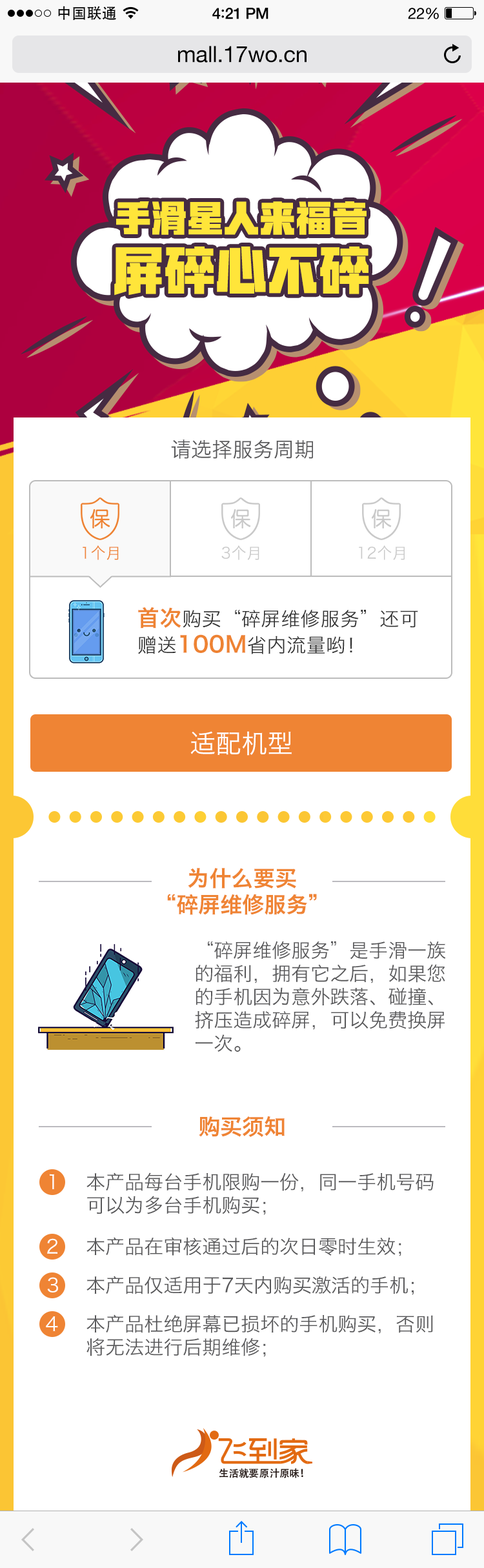
<style>
.page{position:relative;width:484px;height:1568px;background:#ffffff}
.page>*{position:absolute;margin:0}
.t1{font:14.8px "AdobeHeitiStd-Regular";letter-spacing:0.02em;color:#000000}
.t2{font:15.5px "HelveticaNeue-Medium";letter-spacing:-0.02em;color:#000000}
.t3{font:16.8px "Avenir-Medium";letter-spacing:-0.02em;color:#000000}
.t4{font:15.5px "HelveticaNeue";letter-spacing:-0.02em;color:#000000}
.t5{font:22.6px "HelveticaNeue";letter-spacing:-0.01em;color:#000000}
.t6{font:36.1px/56.8px "HYLiLiangHeiJ";color:#ffe53a}
.t7{font:51.6px/56.8px "HYLiLiangHeiJ";color:#ffe53a}
.t8{font:20.6px "HiraginoSansGB-W3";color:#58585a}
.t9{font:15.5px "HiraginoSansGB-W3";color:#ee8434}
.t10{font:15.5px "HiraginoSansGB-W3";color:#c9c9c9}
.t11{font:15.5px "HiraginoSansGB-W3";color:#cacaca}
.t12{font:19.4px "HiraginoSansGB-W3";letter-spacing:0.02em;color:#323232}
.t13{font:21.9px "HiraginoSansGB-W6";letter-spacing:0.02em;color:#ee8333}
.t14{font:25.8px "HiraginoSansGB-W3";color:#ffffff}
.t15{font:21.9px "HiraginoSansGB-W6";color:#ef8434}
.t16{font:19.4px "HiraginoSansGB-W3";color:#58585a}
.t17{font:19.4px "HiraginoSansGB-W3";color:#ffffff}
</style>
<div class="page">
<p class="t1" style="left:58px;top:6px;width:58px;height:14px">中国联通</p>
<p class="t2" style="left:212px;top:8px;width:56px;height:11px">4<span class="t3">:</span>21 PM</p>
<p class="t4" style="left:408px;top:8px;width:31px;height:11px">22%</p>
<p class="t5" style="left:178px;top:46px;width:129px;height:17px">mall.17wo.cn</p>
<p class="t6" style="left:114px;top:201px;width:255px;height:95px;text-align:center">手滑星人来福音<br><span class="t7">屏碎心不碎</span></p>
<p class="t8" style="left:171px;top:439px;width:143px;height:20px">请选择服务周期</p>
<p class="t9" style="left:83px;top:545px;width:36px;height:15px">1个月</p>
<p class="t10" style="left:221px;top:545px;width:38px;height:15px">3个月</p>
<p class="t11" style="left:359px;top:545px;width:46px;height:15px">12个月</p>
<p class="t12" style="left:138px;top:607px;width:280px;height:47px"><span class="t13">首次</span>购买“碎屏维修服务”还可<br>赠送<span class="t13">100M</span>省内流量哟！</p>
<p class="t14" style="left:190px;top:731px;width:102px;height:25px">适配机型</p>
<p class="t15" style="left:167px;top:868px;width:150px;height:47px;text-align:center">为什么要买<br>“碎屏维修服务”</p>
<p class="t16" style="left:195px;top:941px;width:251px;height:111px">“碎屏维修服务”是手滑一族<br>的福利，拥有它之后，如果您<br>的手机因为意外跌落、碰撞、<br>挤压造成碎屏，可以免费换屏<br>一次。</p>
<p class="t15" style="left:199px;top:1116px;width:86px;height:21px">购买须知</p>
<p class="t17" style="left:50px;top:1174px;width:4px;height:15px">1</p>
<p class="t16" style="left:86px;top:1172px;width:348px;height:43px">本产品每台手机限购一份，同一手机号码<br>可以为多台手机购买；</p>
<p class="t17" style="left:47px;top:1238px;width:10px;height:16px">2</p>
<p class="t16" style="left:86px;top:1237px;width:315px;height:19px">本产品在审核通过后的次日零时生效；</p>
<p class="t17" style="left:47px;top:1277px;width:11px;height:15px">3</p>
<p class="t16" style="left:86px;top:1276px;width:328px;height:19px">本产品仅适用于7天内购买激活的手机；</p>
<p class="t17" style="left:46px;top:1316px;width:12px;height:15px">4</p>
<p class="t16" style="left:86px;top:1314px;width:347px;height:43px">本产品杜绝屏幕已损坏的手机购买，否则<br>将无法进行后期维修；</p>
</div>
